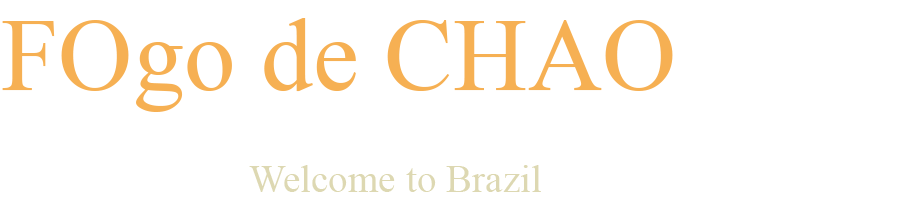
<style>
.page{position:relative;width:910px;height:202px;background:#ffffff}
.page>*{position:absolute;margin:0}
.t1{font:103.1px "TrajanColor-Concept";color:#f6b054}
.t2{font:39.2px "TrajanColor-Concept";color:#ddd9b3}
</style>
<div class="page">
<p class="t1" style="left:2px;top:18px;width:671px;height:94px">FOgo de CHAO</p>
<p class="t2" style="left:249px;top:165px;width:292px;height:27px">Welcome to Brazil</p>
</div>
